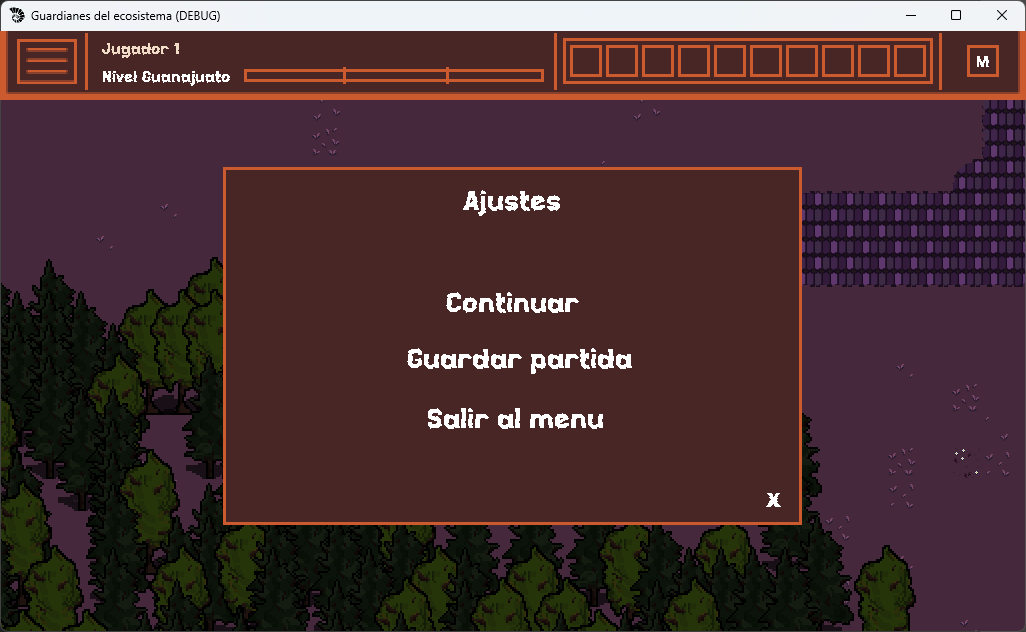
<style>
.page{position:relative;width:1026px;height:632px;background:#482625}
.page>*{position:absolute;margin:0}
.t1{font:15px "eEraDua";color:#f2ddc8}
.t2{font:15px "eEraDua";color:#ffffff}
.t3{font:26px "eEraDua";color:#ffffff}
</style>
<div class="page">
<p class="t1" style="left:102px;top:43px;width:77px;height:15px">Jugador 1</p>
<p class="t2" style="left:977px;top:56px;width:12px;height:11px">M</p>
<p class="t2" style="left:103px;top:71px;width:127px;height:15px">Nivel Guanajuato</p>
<p class="t3" style="left:463px;top:190px;width:97px;height:26px">Ajustes</p>
<p class="t3" style="left:446px;top:292px;width:133px;height:21px">Continuar</p>
<p class="t3" style="left:407px;top:348px;width:225px;height:26px">Guardar partida</p>
<p class="t3" style="left:428px;top:408px;width:175px;height:21px">Salir al menu</p>
<p class="t3" style="left:766px;top:493px;width:15px;height:14px">x</p>
</div>
